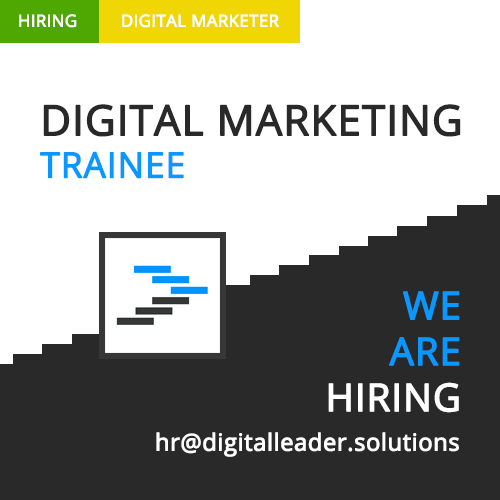
<style>
.page{position:relative;width:500px;height:500px;background:#ffffff}
.page>*{position:absolute;margin:0}
.t1{font:16.7px "OpenSans";color:#ffffff;text-transform:uppercase;font-weight:bold}
.t2{font:42px "OpenSans";color:#292929;text-transform:uppercase;font-weight:bold}
.t3{font:35.2px "OpenSans";color:#0898ff;text-transform:uppercase;font-weight:bold}
.t4{font:38.3px "OpenSans";color:#0898ff;text-transform:uppercase;font-weight:bold}
.t5{font:38.3px "OpenSans";color:#ffffff;text-transform:uppercase;font-weight:bold}
.t6{font:23.6px "OpenSans";color:#ffffff;font-weight:bold}
</style>
<div class="page">
<p class="t1" style="left:19px;top:14px;width:58px;height:14px">hiring</p>
<p class="t1" style="left:122px;top:14px;width:157px;height:14px">digital marketer</p>
<p class="t2" style="left:40px;top:104px;width:421px;height:75px">digital marketing<br><span class="t3">Trainee</span></p>
<p class="t4" style="left:328px;top:291px;width:132px;height:122px;text-align:right">We<br>are<br><span class="t5">hiring</span></p>
<p class="t6" style="left:156px;top:432px;width:303px;height:25px">hr@digitalleader.solutions</p>
</div>
